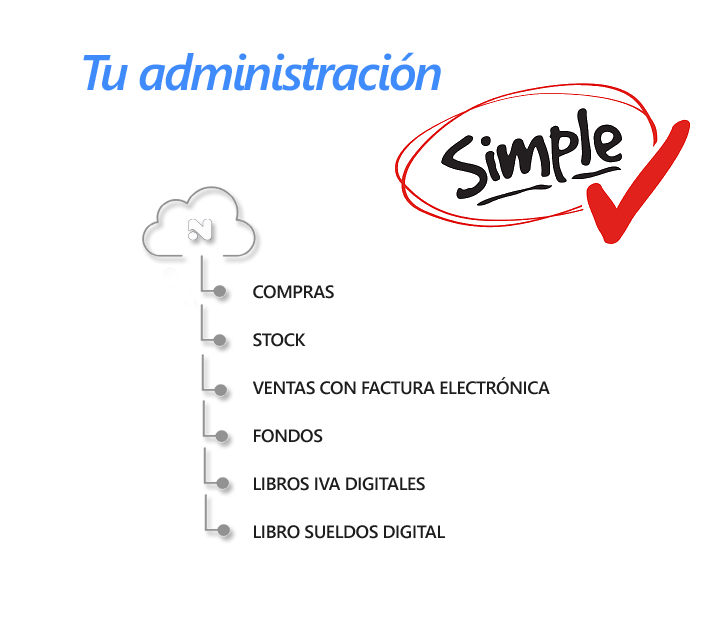
<style>
.page{position:relative;width:709px;height:624px;background:#ffffff}
.page>*{position:absolute;margin:0}
.t1{font:50px "SegoeUI-SemiboldItalic";letter-spacing:-0.05em;color:#3f8bfb}
.t2{font:18px/48px "SegoeUI-Semibold";letter-spacing:-0.025em;color:#1d1d1d}
</style>
<div class="page">
<p class="t1" style="left:83px;top:52px;width:358px;height:39px">Tu administración</p>
<p class="t2" style="left:252px;top:285px;width:298px;height:254px">COMPRAS<br>STOCK<br>VENTAS CON FACTURA ELECTRÓNICA<br>FONDOS<br>LIBROS IVA DIGITALES<br>LIBRO SUELDOS DIGITAL</p>
</div>
